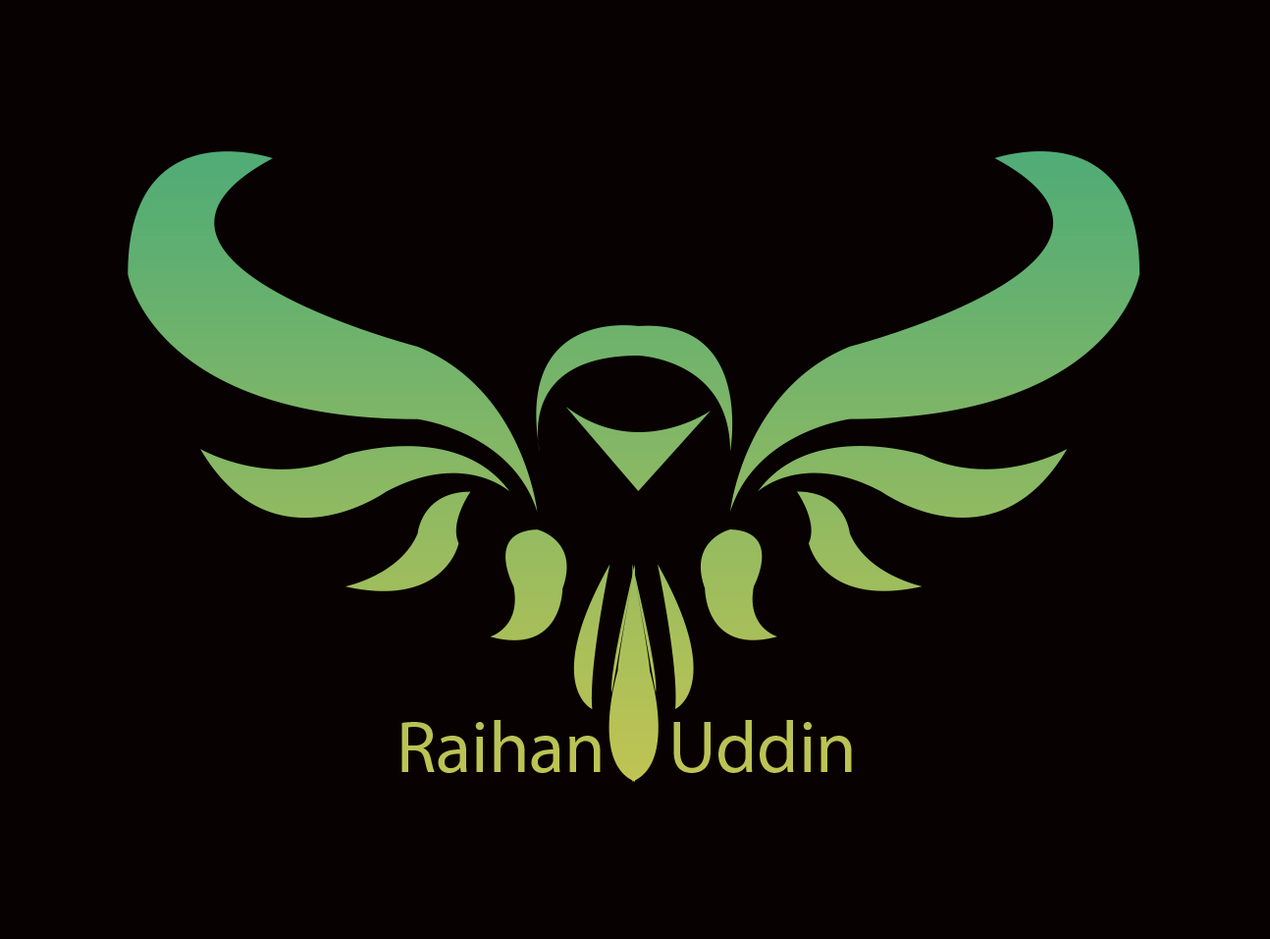
<style>
.page{position:relative;width:1270px;height:939px;background:#080101}
.page>*{position:absolute;margin:0}
.t1{font:73.6px "MyriadPro-Regular";color:#bbc354}
</style>
<div class="page">
<p class="t1" style="left:402px;top:720px;width:450px;height:53px">Raihan    Uddin</p>
</div>
